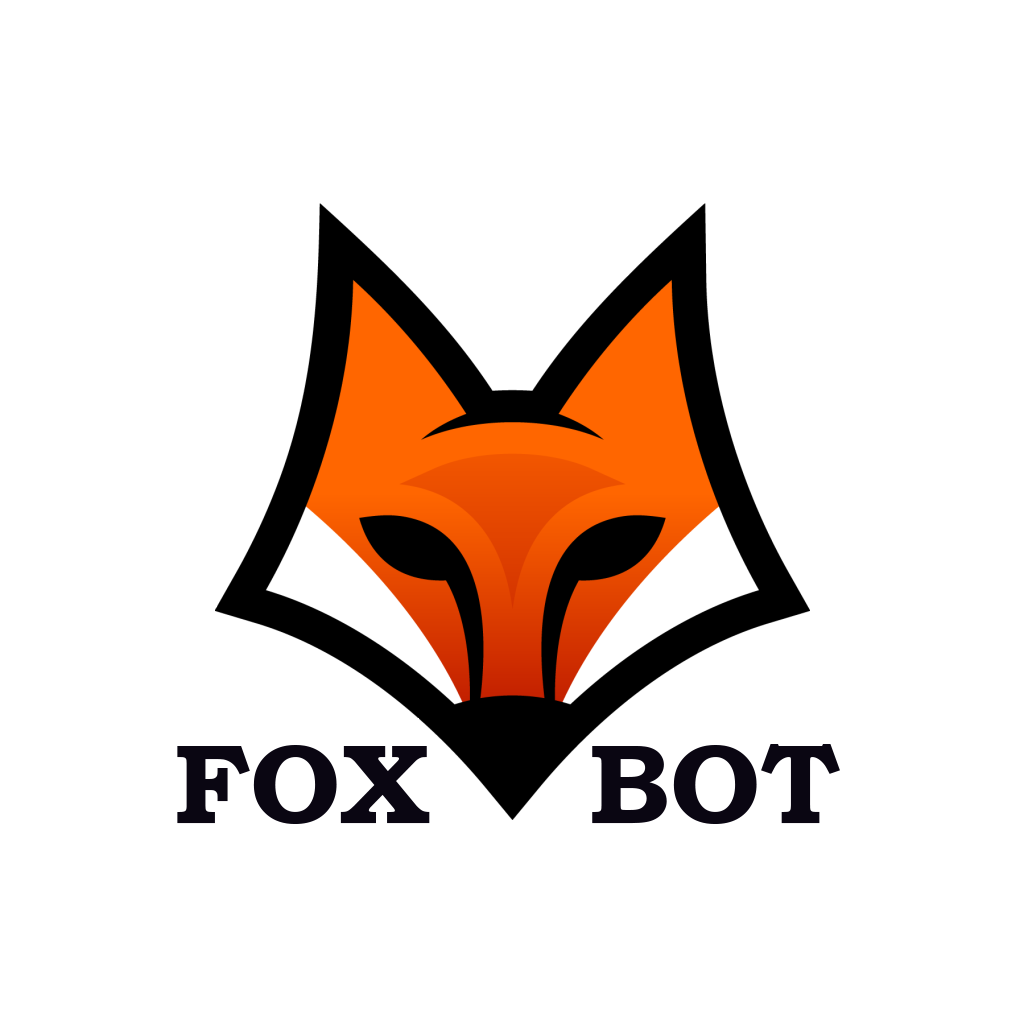
<style>
.page{position:relative;width:1024px;height:1024px;background:#ffffff}
.page>*{position:absolute;margin:0}
.t1{font:112.5px "BookmanOldStyle-Bold";letter-spacing:0.01em;color:#0a0612}
</style>
<div class="page">
<p class="t1" style="left:177px;top:744px;width:663px;height:80px">FOX    BOT</p>
</div>
